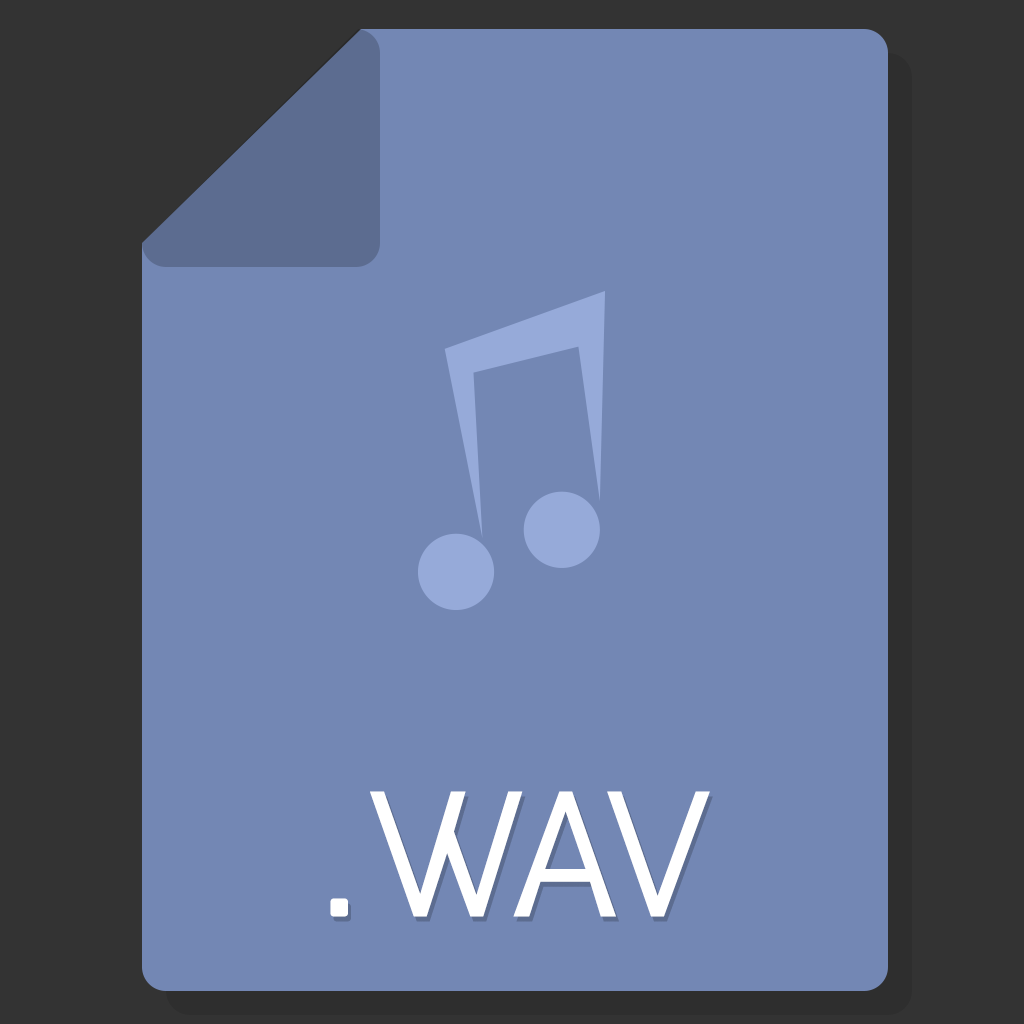
<style>
.page{position:relative;width:1024px;height:1024px;background:#7387b4}
.page>*{position:absolute;margin:0}
.t1{font:170.3px "Exo-Regular";color:#ffffff}
</style>
<div class="page">
<p class="t1" style="left:330px;top:791px;width:380px;height:126px">.WAV</p>
</div>
